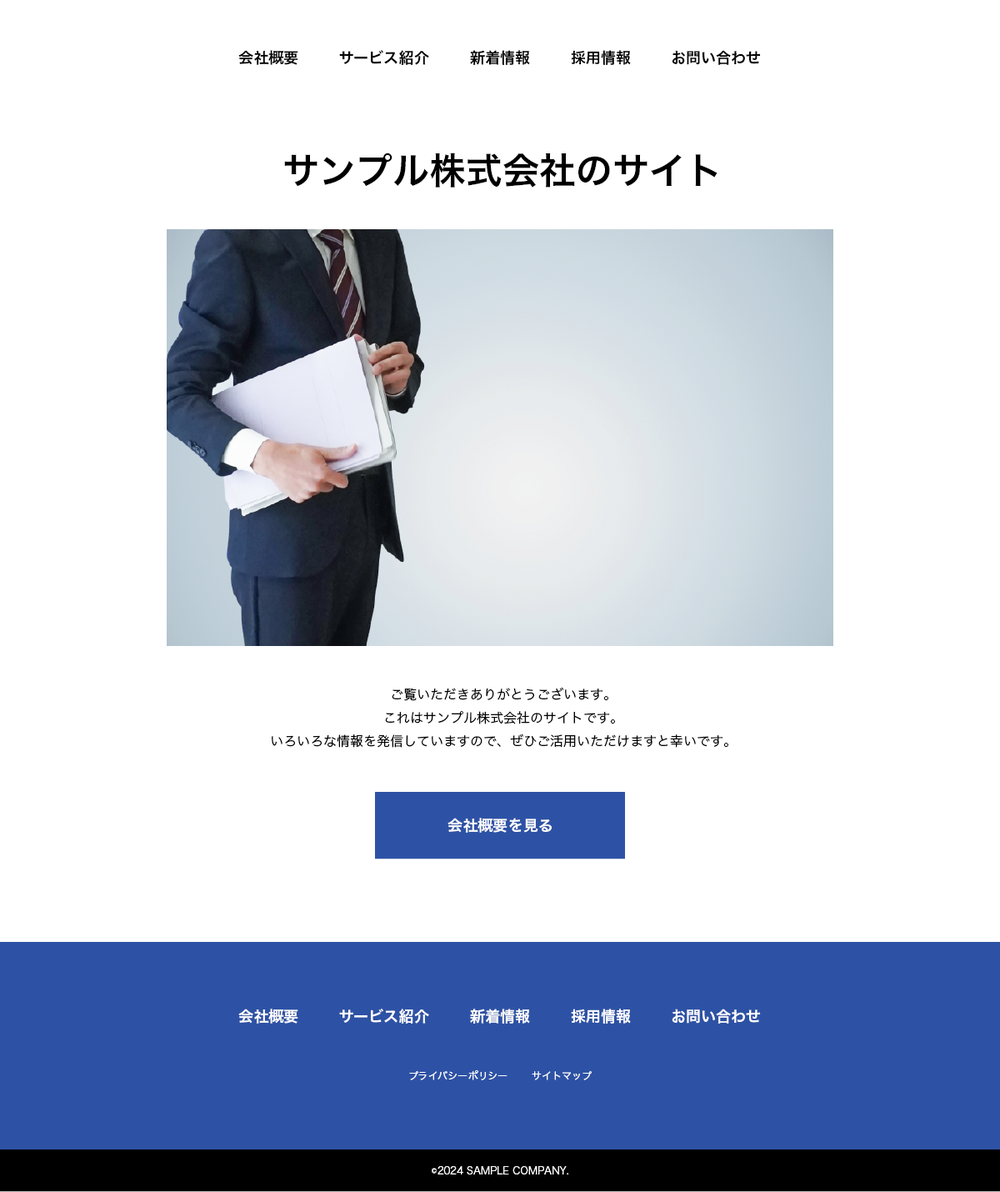
<style>
.page{position:relative;width:1000px;height:1192px;background:#ffffff}
.page>*{position:absolute;margin:0}
.t1{font:15px "HiraKakuProN-W6";color:#000000}
.t2{font:36.7px "HiraKakuProN-W6";color:#000000}
.t3{font:13.3px "HiraKakuProN-W3";color:#000000}
.t4{font:15px "HiraKakuProN-W6";color:#ffffff}
.t5{font:10px "HiraKakuProN-W3";color:#ffffff}
</style>
<div class="page">
<p class="t1" style="left:238px;top:50px;width:60px;height:15px">会社概要</p>
<p class="t1" style="left:339px;top:50px;width:90px;height:15px">サービス紹介</p>
<p class="t1" style="left:470px;top:50px;width:60px;height:15px">新着情報</p>
<p class="t1" style="left:571px;top:50px;width:60px;height:15px">採用情報</p>
<p class="t1" style="left:672px;top:50px;width:89px;height:15px">お問い合わせ</p>
<p class="t2" style="left:284px;top:153px;width:434px;height:35px">サンプル株式会社のサイト</p>
<p class="t3" style="left:272px;top:687px;width:457px;height:61px;text-align:center">ご覧いただきありがとうございます。<br>これはサンプル株式会社のサイトです。<br>いろいろな情報を発信していますので、ぜひご活用いただけますと幸いです。</p>
<p class="t4" style="left:448px;top:818px;width:104px;height:15px">会社概要を見る</p>
<p class="t4" style="left:238px;top:1009px;width:60px;height:15px">会社概要</p>
<p class="t4" style="left:339px;top:1009px;width:90px;height:15px">サービス紹介</p>
<p class="t4" style="left:470px;top:1009px;width:60px;height:15px">新着情報</p>
<p class="t4" style="left:571px;top:1009px;width:60px;height:15px">採用情報</p>
<p class="t4" style="left:672px;top:1009px;width:89px;height:15px">お問い合わせ</p>
<p class="t5" style="left:409px;top:1070px;width:99px;height:10px">プライバシーポリシー</p>
<p class="t5" style="left:532px;top:1071px;width:60px;height:9px">サイトマップ</p>
<p class="t5" style="left:432px;top:1166px;width:137px;height:9px">©2024 SAMPLE COMPANY.</p>
</div>
